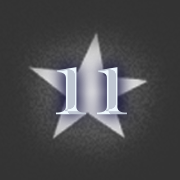
<style>
.page{position:relative;width:180px;height:180px}
.page>*{position:absolute;margin:0}
.t1{font:67.7px "FZQKBYSJW--GB1-0";scale:1.71 1}
</style>
<div class="page">
<p class="t1" style="left:55px;top:67px;width:72px;height:48px">11</p>
</div>
